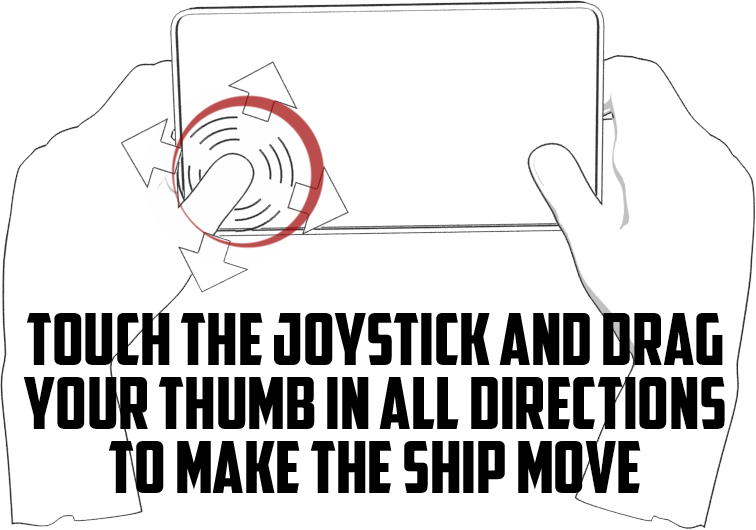
<style>
.page{position:relative;width:756px;height:530px;background:#ffffff}
.page>*{position:absolute;margin:0}
.t1{font:72px/64px "AmericanCaptain";color:#000000}
</style>
<div class="page">
<p class="t1" style="left:23px;top:313px;width:702px;height:180px;text-align:center">TOUCH THE JOYSTICK AND DRAG<br>YOUR THUMB IN ALL DIRECTIONS<br>TO MAKE THE SHIP MOVE</p>
</div>
